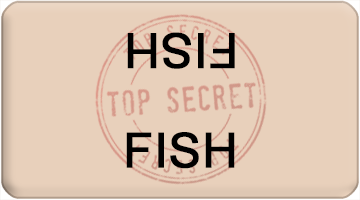
<style>
.page{position:relative;width:360px;height:200px;background:#e8d0bb}
.page>*{position:absolute;margin:0}
.t1{font:48px "ArialMT";color:#000000;font-weight:bold}
</style>
<div class="page">
<p class="t1" style="left:127px;top:32px;width:108px;height:37px;rotate:180deg">FISH</p>
<p class="t1" style="left:126px;top:132px;width:109px;height:37px">FISH</p>
</div>
